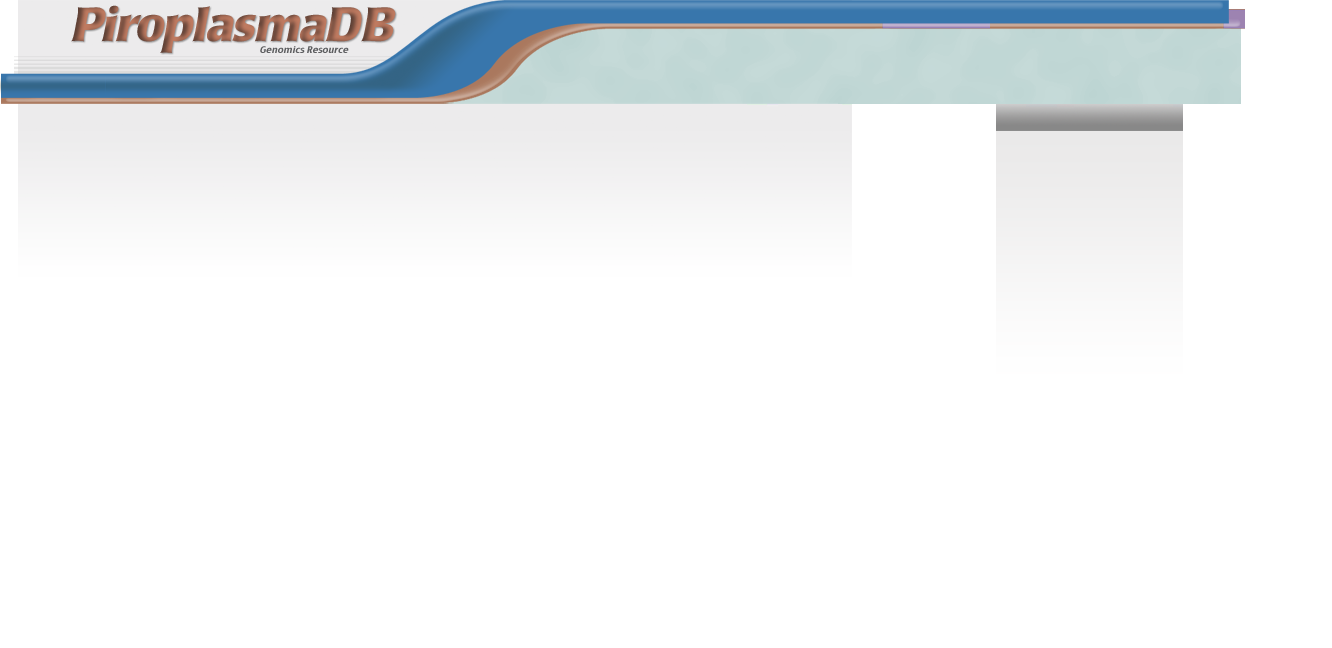
<style>
.page{position:relative;width:1332px;height:648px;background:#ffffff}
.page>*{position:absolute;margin:0}
.t1{font:48px "PopplLaudatio-Bold";letter-spacing:-0.02em}
.t2{font:9.3px "CharcoalCY";letter-spacing:0.01em;color:#5d5e60}
</style>
<div class="page">
<p class="t1" style="left:71px;top:5px;width:325px;height:48px">PiroplasmaDB</p>
<p class="t2" style="left:260px;top:46px;width:89px;height:7px">Genomics Resource</p>
</div>
